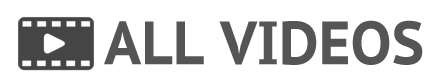
<style>
.page{position:relative;width:440px;height:81px;background:#ffffff}
.page>*{position:absolute;margin:0}
.t1{font:61.1px "PTSans-CaptionBold";color:#555555;scale:0.93 1}
</style>
<div class="page">
<p class="t1" style="left:104px;top:20px;width:319px;height:45px">ALL VIDEOS</p>
</div>
